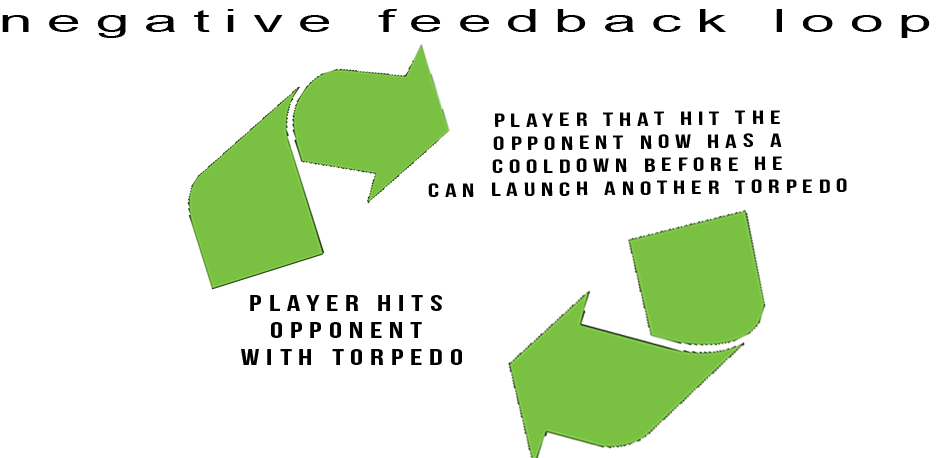
<style>
.page{position:relative;width:936px;height:458px;background:#ffffff}
.page>*{position:absolute;margin:0}
.t1{font:7.8px "ArialNarrow";letter-spacing:0.2em;color:#000000;scale:2.27 1}
.t2{font:19.2px "BebasNeue";letter-spacing:0.2em;color:#000000;scale:1.5 1}
.t3{font:22.5px "BebasNeue";letter-spacing:0.2em;color:#000000;scale:1.5 1}
</style>
<div class="page">
<p class="t1" style="left:2px;top:9px;width:928px;height:29px;text-align:center">negative feedback loop</p>
<p class="t2" style="left:428px;top:110px;width:419px;height:87px;text-align:center;rotate:-1deg">player that hit the <br>opponent now has a <br>cooldown before he <br>can launch another torpedo</p>
<p class="t3" style="left:241px;top:295px;width:221px;height:70px;text-align:center">player hits <br>opponent <br>with torpedo</p>
</div>
